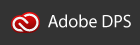
<style>
.page{position:relative;width:140px;height:45px;background:#333333}
.page>*{position:absolute;margin:0}
.t1{font:18px "MyriadPro-Regular";color:#ffffff}
</style>
<div class="page">
<p class="t1" style="left:48px;top:14px;width:83px;height:14px">Adobe DPS</p>
</div>
